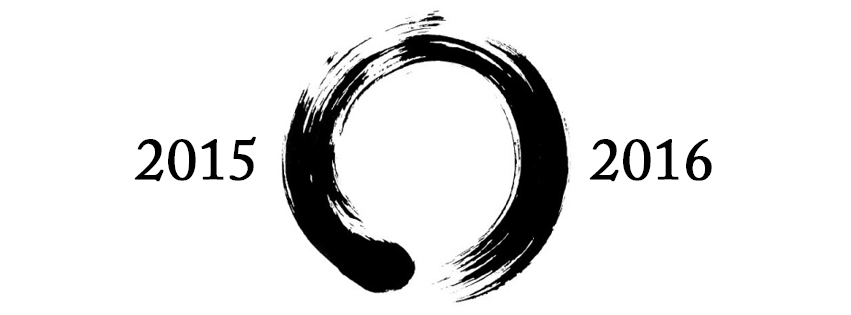
<style>
.page{position:relative;width:851px;height:315px;background:#ffffff}
.page>*{position:absolute;margin:0}
.t1{font:58.8px "ACaslonPro-Regular";color:#000000;font-weight:bold}
</style>
<div class="page">
<p class="t1" style="left:134px;top:136px;width:122px;height:46px">2015</p>
<p class="t1" style="left:589px;top:139px;width:123px;height:43px">2016</p>
</div>
